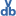
<style>
.page{position:relative;width:16px;height:16px;background:#ffffff}
.page>*{position:absolute;margin:0}
.t1{font:12px "HelveticaNeue-Bold";color:#3566a5;scale:1.08 1}
.t2{font:10px "HelveticaNeue-Bold";color:#3566a5;scale:1.08 1}
</style>
<div class="page">
<p class="t1" style="left:0px;top:6px;width:16px;height:10px">db</p>
<p class="t2" style="left:4px;top:0px;width:8px;height:7px">V</p>
</div>
